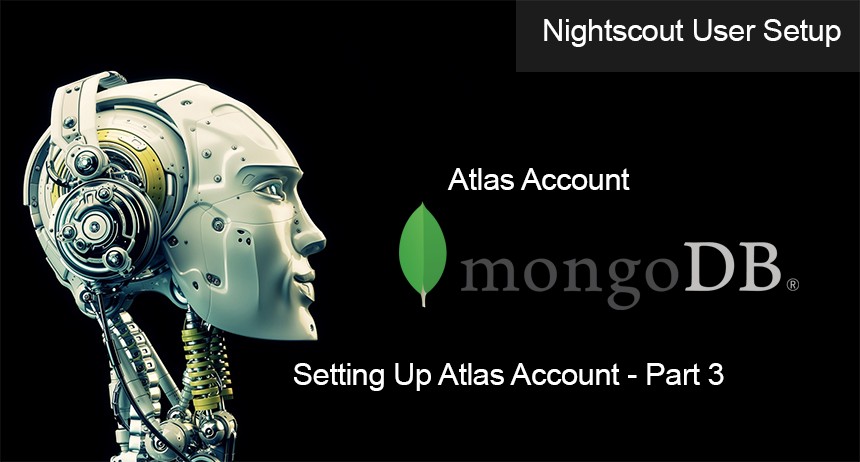
<style>
.page{position:relative;width:860px;height:462px;background:#000000}
.page>*{position:absolute;margin:0}
.t1{font:31.3px "ArialMT";letter-spacing:-0.021em;color:#ffffff}
</style>
<div class="page">
<p class="t1" style="left:544px;top:19px;width:297px;height:28px">Nightscout User Setup</p>
<p class="t1" style="left:447px;top:168px;width:183px;height:22px">Atlas Account</p>
<p class="t1" style="left:294px;top:363px;width:430px;height:28px">Setting Up Atlas Account - Part 3</p>
</div>
